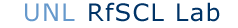
<style>
.page{position:relative;width:238px;height:28px;background:#ffffff}
.page>*{position:absolute;margin:0}
.t1{font:24px "Verdana";letter-spacing:0.055em;color:#6699cc}
.t2{font:24px "Verdana";letter-spacing:0.055em;color:#003366}
</style>
<div class="page">
<p class="t1" style="left:25px;top:3px;width:50px;height:19px">UNL</p>
<p class="t2" style="left:89px;top:2px;width:131px;height:20px">RfSCL Lab</p>
</div>
